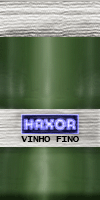
<style>
.page{position:relative;width:100px;height:200px}
.page>*{position:absolute;margin:0}
.t1{font:8px "LucidaConsole";letter-spacing:-0.08em;color:#000000;font-weight:bold;scale:1.3 1}
</style>
<div class="page">
<p class="t1" style="left:21px;top:136px;width:58px;height:6px">VINHO FINO</p>
</div>
